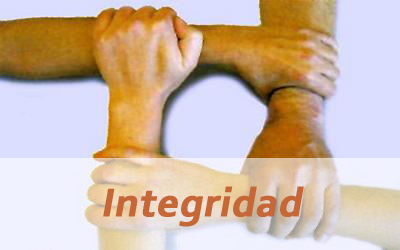
<style>
.page{position:relative;width:400px;height:250px}
.page>*{position:absolute;margin:0}
.t1{font:41.7px "Corbel-Bold";letter-spacing:0.005em;color:#c66738;font-weight:bold;font-style:italic}
</style>
<div class="page">
<p class="t1" style="left:103px;top:186px;width:201px;height:41px">Integridad</p>
</div>
